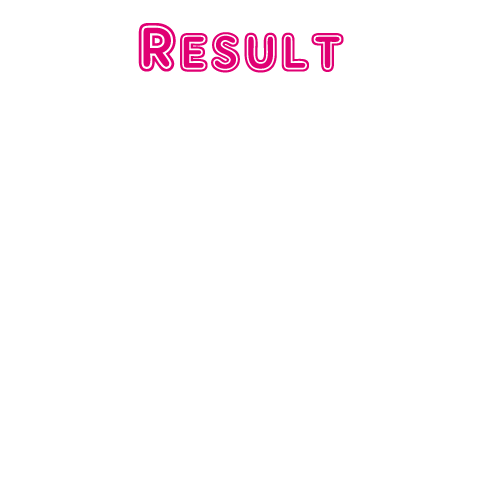
<style>
.page{position:relative;width:500px;height:500px;background:#ffffff}
.page>*{position:absolute;margin:0}
.t1{font:72px "ARDELANEY";color:#e00073}
</style>
<div class="page">
<p class="t1" style="left:138px;top:23px;width:206px;height:50px">Result</p>
</div>
